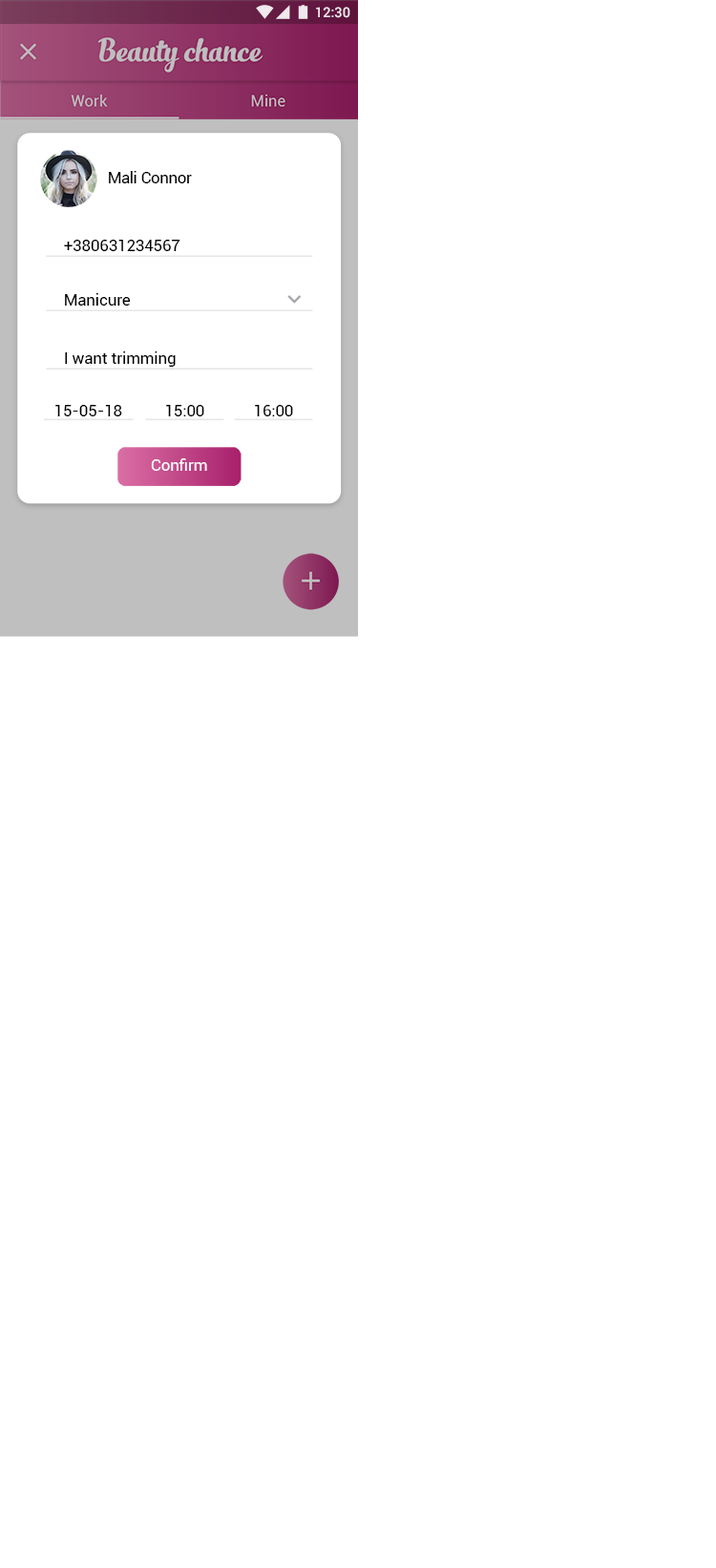
<style>
.page{position:relative;width:716px;height:1568px;background:#ffffff}
.page>*{position:absolute;margin:0}
.t1{font:13.9px "Roboto-Medium";color:#ffffff}
.t2{font:15.9px "Roboto-Regular";letter-spacing:-0.005em;color:#000000}
.t3{font:15.9px "Roboto-Regular";color:#000000}
.t4{font:15.9px "Roboto-Regular";color:#ffffff}
</style>
<div class="page">
<p class="t1" style="left:316px;top:7px;width:34px;height:11px">12:30</p>
<p class="t2" style="left:109px;top:171px;width:83px;height:12px">Mali Connor</p>
<p class="t3" style="left:64px;top:240px;width:116px;height:11px">+380631234567</p>
<p class="t3" style="left:65px;top:293px;width:66px;height:13px">Manicure</p>
<p class="t3" style="left:65px;top:351px;width:111px;height:16px">I want trimming</p>
<p class="t3" style="left:55px;top:405px;width:67px;height:11px">15-05-18</p>
<p class="t3" style="left:166px;top:405px;width:38px;height:11px">15:00</p>
<p class="t3" style="left:255px;top:405px;width:38px;height:11px">16:00</p>
<p class="t4" style="left:151px;top:458px;width:56px;height:13px">Confirm</p>
</div>
